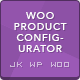
<style>
.page{position:relative;width:80px;height:80px;background:#8d51a6}
.page>*{position:absolute;margin:0}
.t1{font:10px/11px "AvenirNext-Medium";letter-spacing:0.075em;color:#ffffff;text-transform:uppercase}
.t2{font:10px "VisitorTT1BRK";letter-spacing:0.075em;color:#d1b8dd;text-transform:uppercase}
</style>
<div class="page">
<p class="t1" style="left:14px;top:12px;width:53px;height:40px;text-align:center">Woo Product Config-<br>urator</p>
<p class="t2" style="left:10px;top:62px;width:59px;height:5px">JK WP Woo</p>
</div>
